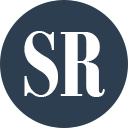
<style>
.page{position:relative;width:128px;height:128px;background:#2c3e50}
.page>*{position:absolute;margin:0}
.t1{font:100px "BodoniMTCondensed-Bold";color:#ffffff}
</style>
<div class="page">
<p class="t1" style="left:24px;top:31px;width:81px;height:66px">SR</p>
</div>
